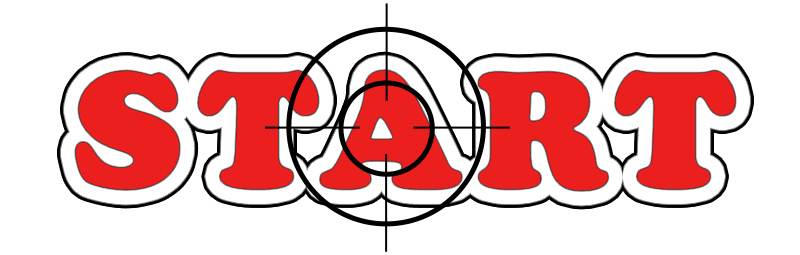
<style>
.page{position:relative;width:800px;height:255px;background:#ffffff}
.page>*{position:absolute;margin:0}
.t1{font:161px "CooperBlackStd";letter-spacing:0.1em;color:#ec1f1f;text-transform:uppercase}
</style>
<div class="page">
<p class="t1" style="left:76px;top:70px;width:659px;height:121px">START</p>
</div>
